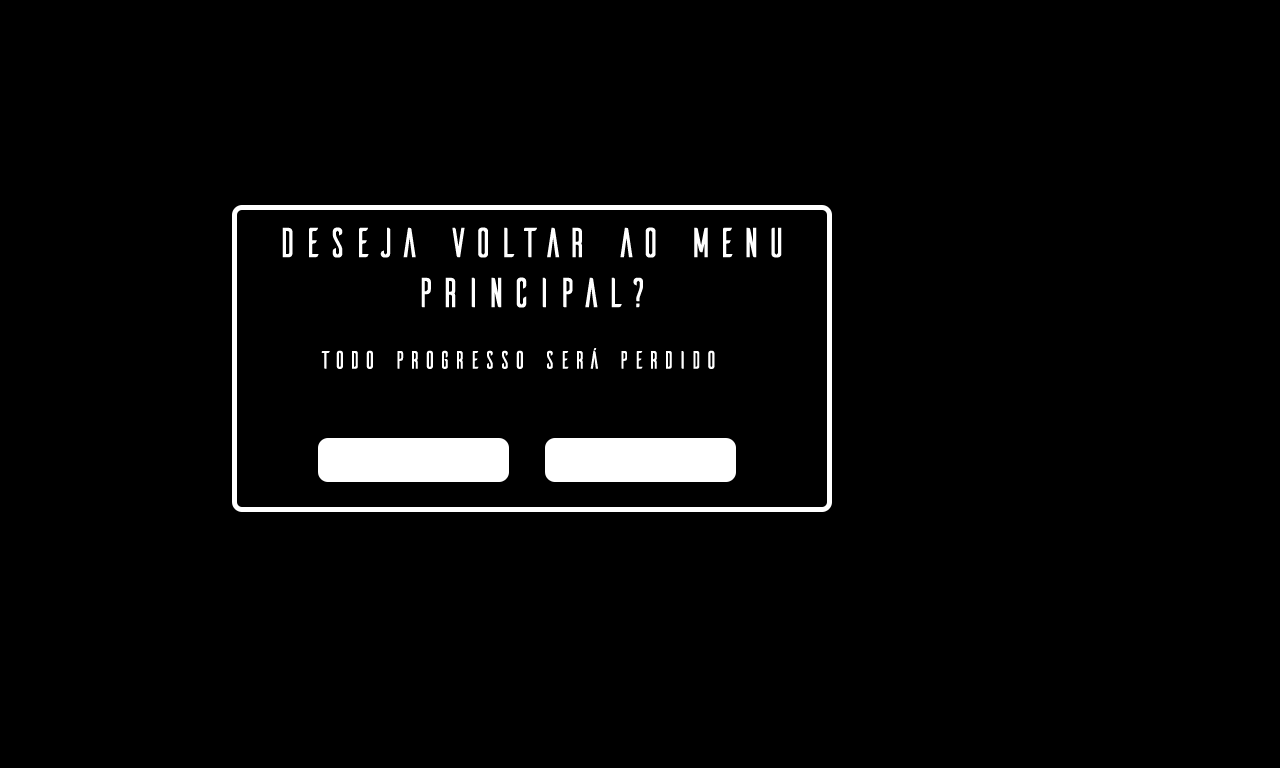
<style>
.page{position:relative;width:1280px;height:768px;background:#000000}
.page>*{position:absolute;margin:0}
.t1{font:41.7px "Ailerons-Regular";color:#ffffff}
.t2{font:25px "Ailerons-Regular";color:#ffffff}
</style>
<div class="page">
<p class="t1" style="left:282px;top:227px;width:500px;height:81px;text-align:center">deseja voltar ao menu principal?</p>
<p class="t2" style="left:321px;top:348px;width:394px;height:21px">todo progresso será perdido</p>
</div>
